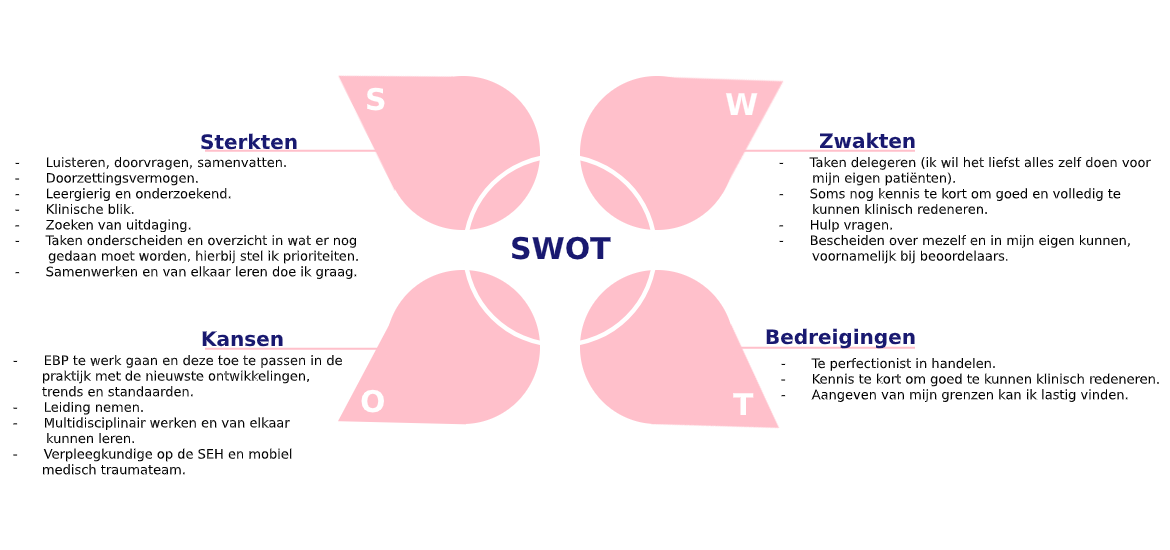
<style>
.page{position:relative;width:1170px;height:550px;background:#ffffff}
.page>*{position:absolute;margin:0}
.t1{font:30px "DejaVuSans-Bold";color:#ffffff}
.t2{font:20px "DejaVuSans-Bold";color:#191970}
.t3{font:13px "DejaVuSans";color:#000000}
.t4{font:11px "DejaVuSans";color:#000000}
.t5{font:30px "DejaVuSans-Bold";color:#191970}
</style>
<div class="page">
<p class="t1" style="left:367px;top:87px;width:18px;height:24px">S</p>
<p class="t1" style="left:725px;top:93px;width:33px;height:22px">W</p>
<p class="t2" style="left:201px;top:133px;width:96px;height:17px">Sterkten</p>
<p class="t2" style="left:819px;top:132px;width:96px;height:17px">Zwakten</p>
<p class="t3" style="left:15px;top:157px;width:343px;height:122px">- Luisteren, doorvragen, samenvatten.<br>- Doorzettingsvermogen. <br>- Leergierig en onderzoekend.<br>- Klinische blik.<br>- Zoeken van uitdaging. <br>- Taken onderscheiden en overzicht in wat er nog <br>        gedaan moet worden, hierbij stel ik prioriteiten.<br>- Samenwerken en van elkaar leren doe ik graag.</p>
<p class="t3" style="left:779px;top:157px;width:372px;height:107px">- Taken delegeren (ik wil het liefst alles zelf doen voor <br>        mijn eigen patiënten).<br>- Soms nog kennis te kort om goed en volledig te <br>        kunnen klinisch redeneren.<br>- Hulp vragen. <br>- Bescheiden over mezelf en in mijn eigen kunnen,<br>        voornamelijk bij beoordelaars<span class="t4">.</span></p>
<p class="t5" style="left:512px;top:236px;width:99px;height:24px">SWOT</p>
<p class="t2" style="left:766px;top:328px;width:149px;height:21px">Bedreigingen</p>
<p class="t2" style="left:202px;top:331px;width:81px;height:16px">Kansen</p>
<p class="t3" style="left:13px;top:355px;width:329px;height:120px">- EBP te werk gaan en deze toe te passen in de <br>       praktijk met de nieuwste ontwikkelingen, <br>       trends en standaarden.<br>- Leiding nemen.<br>- Multidisciplinair werken en van elkaar <br>        kunnen leren.<br>- Verpleegkundige op de SEH en mobiel <br>       medisch traumateam.</p>
<p class="t3" style="left:781px;top:358px;width:378px;height:44px">- Te perfectionist in handelen.<br>- Kennis te kort om goed te kunnen klinisch redeneren.<br>- Aangeven van mijn grenzen kan ik lastig vinden.</p>
<p class="t1" style="left:361px;top:389px;width:23px;height:24px">O</p>
<p class="t1" style="left:733px;top:393px;width:21px;height:22px">T</p>
</div>
